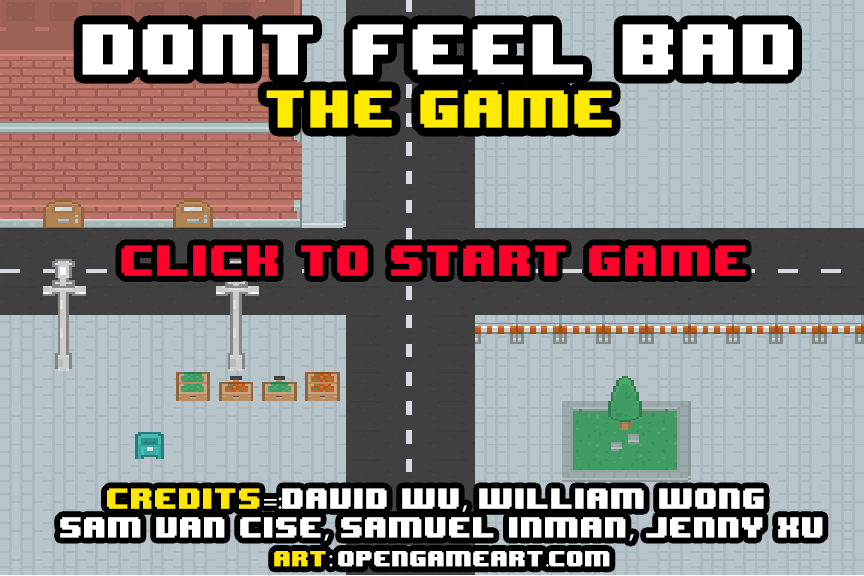
<style>
.page{position:relative;width:864px;height:576px;background:#b8c5ca}
.page>*{position:absolute;margin:0}
.t1{font:60px "8BITWONDERNominal";color:#ffffff}
.t2{font:44px "8BITWONDERNominal";color:#ffea00}
.t3{font:36px "8BITWONDERNominal";color:#ff022c}
.t4{font:24px "8BITWONDERNominal";color:#ffffff}
.t5{font:24px "8BITWONDERNominal";color:#ffe603}
.t6{font:24px "MyriadPro-Regular";color:#ffffff}
.t7{font:18px "8BITWONDERNominal";color:#ffe602}
.t8{font:18px "8BITWONDERNominal";color:#ffffff}
.t9{font:18px "MyriadPro-Regular";color:#ffffff}
</style>
<div class="page">
<p class="t1" style="left:82px;top:24px;width:711px;height:104px;text-align:center">DONT FEEL BAD<br><span class="t2">The game</span></p>
<p class="t3" style="left:121px;top:245px;width:625px;height:31px">Click to start game</p>
<p class="t4" style="left:60px;top:488px;width:763px;height:79px;text-align:center"><span class="t5">Credits</span><span class="t6">=:</span>David Wu<span class="t6">,</span> William wong <br>Sam Van CisE<span class="t6">,</span> Samuel inman<span class="t6">,</span> Jenny Xu<br><span class="t7">Art</span><span class="t6">: </span><span class="t8">opengameart</span><span class="t9">.</span><span class="t8">com</span></p>
</div>
